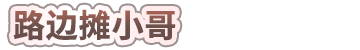
<style>
.page{position:relative;width:360px;height:50px;background:#ffffff}
.page>*{position:absolute;margin:0}
.t1{font:32px "SourceHanSansSC-Bold";font-weight:bold}
</style>
<div class="page">
<p class="t1" style="left:13px;top:9px;width:163px;height:32px">路边摊小哥</p>
</div>
